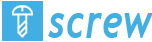
<style>
.page{position:relative;width:152px;height:42px;background:#ffffff}
.page>*{position:absolute;margin:0}
.t1{font:48px "Trebuchet-BoldItalic";letter-spacing:0.025em;color:#41afe3;scale:0.76 1}
</style>
<div class="page">
<p class="t1" style="left:48px;top:13px;width:105px;height:25px">screw</p>
</div>
